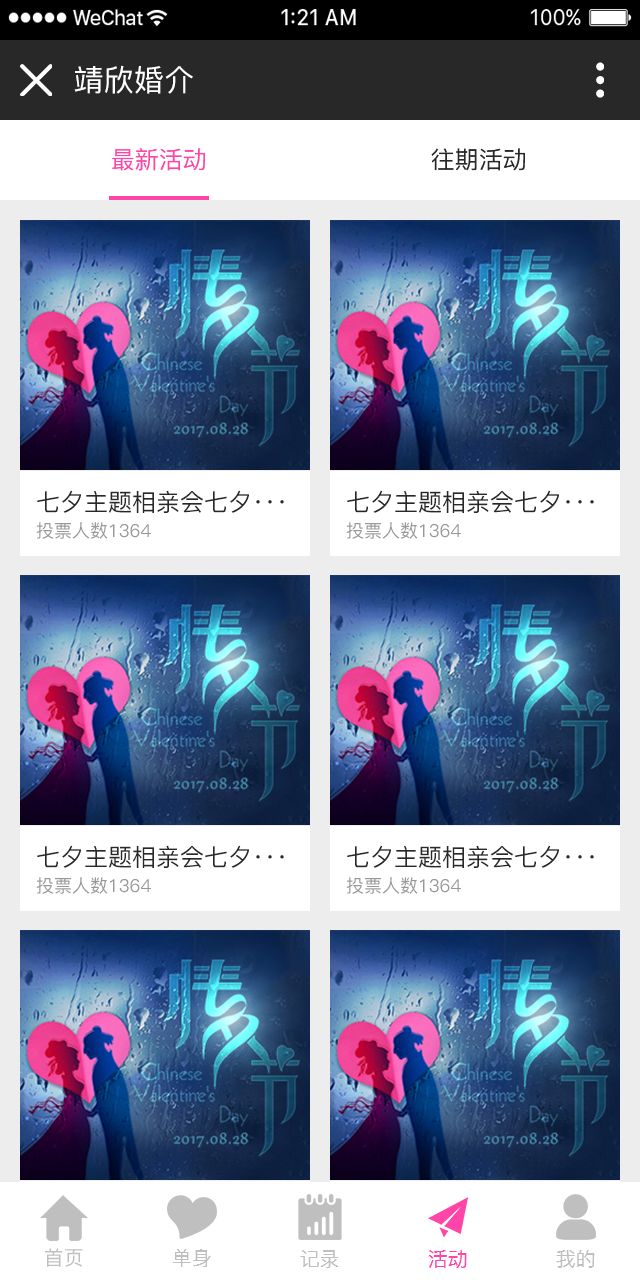
<style>
.page{position:relative;width:640px;height:1280px;background:#ffffff}
.page>*{position:absolute;margin:0}
.t1{font:30px "PingFang-SC-Medium";letter-spacing:0.01em;color:#ffffff;text-transform:uppercase}
.t2{font:24px "PingFang-SC-Medium";color:#ff45a8;text-transform:uppercase}
.t3{font:24px "PingFang-SC-Medium";color:#282828;text-transform:uppercase}
.t4{font:18px "PingFang-SC-Medium";color:#989898;text-transform:uppercase}
.t5{font:20px "PingFang-SC-Medium";color:#bfbfbf;text-transform:uppercase}
.t6{font:20px "PingFang-SC-Medium";color:#ff45a8;text-transform:uppercase}
</style>
<div class="page">
<p class="t1" style="left:74px;top:65px;width:119px;height:29px">靖欣婚介</p>
<p class="t2" style="left:112px;top:148px;width:93px;height:23px">最新活动</p>
<p class="t3" style="left:431px;top:148px;width:94px;height:23px">往期活动</p>
<p class="t3" style="left:37px;top:490px;width:247px;height:23px">七夕主题相亲会七夕···</p>
<p class="t3" style="left:347px;top:490px;width:247px;height:23px">七夕主题相亲会七夕···</p>
<p class="t4" style="left:36px;top:522px;width:115px;height:17px">投票人数1364</p>
<p class="t4" style="left:346px;top:522px;width:115px;height:17px">投票人数1364</p>
<p class="t3" style="left:37px;top:845px;width:247px;height:23px">七夕主题相亲会七夕···</p>
<p class="t3" style="left:347px;top:845px;width:247px;height:23px">七夕主题相亲会七夕···</p>
<p class="t4" style="left:36px;top:877px;width:115px;height:17px">投票人数1364</p>
<p class="t4" style="left:346px;top:877px;width:115px;height:17px">投票人数1364</p>
<p class="t5" style="left:45px;top:1248px;width:38px;height:19px">首页</p>
<p class="t5" style="left:172px;top:1249px;width:39px;height:18px">单身</p>
<p class="t5" style="left:300px;top:1250px;width:39px;height:18px">记录</p>
<p class="t6" style="left:428px;top:1250px;width:39px;height:18px">活动</p>
<p class="t5" style="left:556px;top:1250px;width:39px;height:18px">我的</p>
</div>
